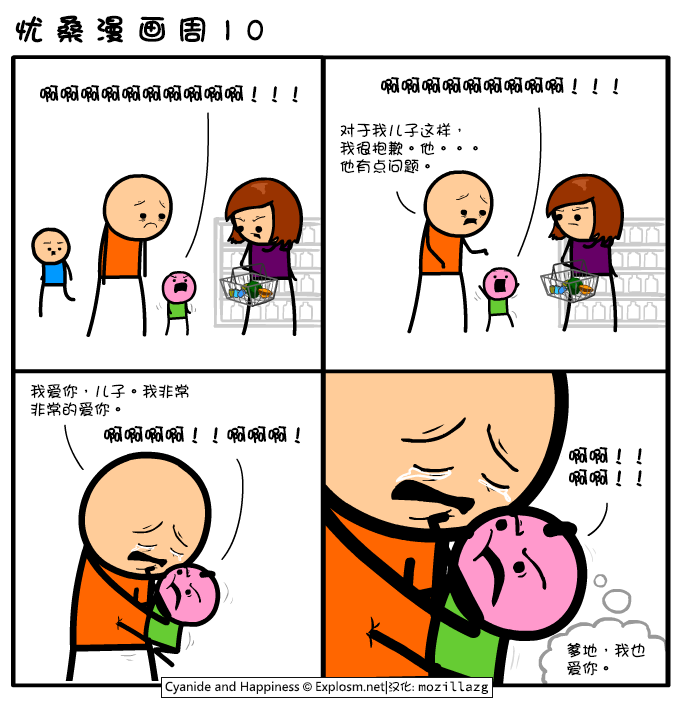
<style>
.page{position:relative;width:690px;height:710px;background:#ffffff}
.page>*{position:absolute;margin:0}
.t1{font:30px "DFGirl";letter-spacing:0.34em;color:#000000;font-weight:bold}
.t2{font:20px "DFGirl";color:#000000;font-weight:bold}
.t3{font:16px/18px "DFGirl";color:#000000}
.t4{font:20px/22px "DFGirl";color:#000000;font-weight:bold}
</style>
<div class="page">
<p class="t1" style="left:15px;top:15px;width:248px;height:28px">忧桑漫画周10</p>
<p class="t2" style="left:381px;top:77px;width:238px;height:18px">啊啊啊啊啊啊啊啊啊！！！</p>
<p class="t2" style="left:40px;top:85px;width:258px;height:18px">啊啊啊啊啊啊啊啊啊啊！！！</p>
<p class="t3" style="left:340px;top:123px;width:138px;height:51px">对于我儿子这样，<br>我很抱歉。他。。。<br>他有点问题。</p>
<p class="t3" style="left:30px;top:384px;width:159px;height:33px">我爱你，儿子。我非常<br>非常的爱你。</p>
<p class="t2" style="left:104px;top:426px;width:196px;height:18px">啊啊啊啊！！啊啊啊！</p>
<p class="t4" style="left:569px;top:447px;width:73px;height:40px">啊啊！！<br>啊啊！！</p>
<p class="t3" style="left:567px;top:643px;width:78px;height:33px">爹地，我也<br>爱你。</p>
</div>
